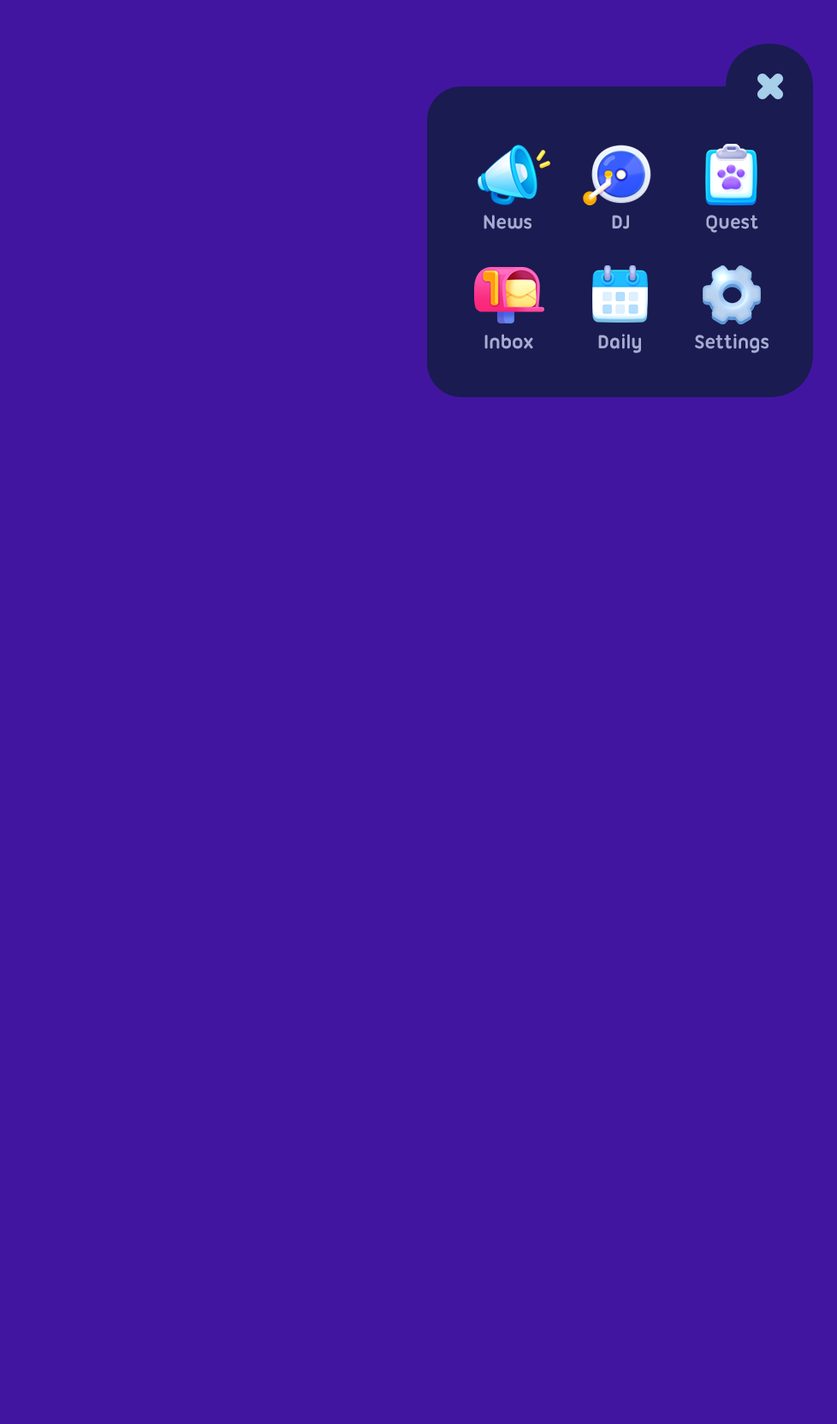
<style>
.page{position:relative;width:837px;height:1424px;background:#4115a0}
.page>*{position:absolute;margin:0}
.t1{font:20.5px "UbuntuTitling-Bold";letter-spacing:-0.025em;color:#a5acd3}
</style>
<div class="page">
<p class="t1" style="left:484px;top:215px;width:48px;height:14px">News</p>
<p class="t1" style="left:612px;top:215px;width:17px;height:14px">DJ</p>
<p class="t1" style="left:706px;top:215px;width:52px;height:18px">Quest</p>
<p class="t1" style="left:484px;top:334px;width:49px;height:15px">Inbox</p>
<p class="t1" style="left:598px;top:334px;width:43px;height:20px">Daily</p>
<p class="t1" style="left:695px;top:334px;width:74px;height:20px">Settings</p>
</div>
